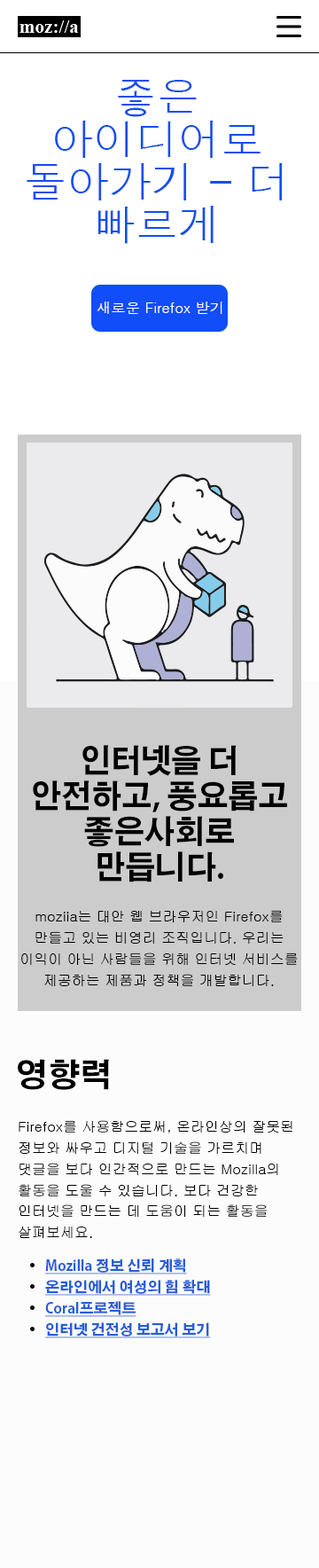
<style>
.page{position:relative;width:319px;height:1568px;background:#fcfcfc}
.page>*{position:absolute;margin:0}
.t1{font:42.6px/42.6px "Dotum";color:#134df2}
.t2{font:14.2px "Dotum";color:#fefefe}
.t3{font:31.9px/35.5px "AdobeGothicStd-Bold";color:#000000;scale:0.95 1}
.t4{font:14.2px/21.3px "Gulim";color:#000000}
.t5{font:31.9px "AdobeGothicStd-Bold";color:#000000}
.t6{font:14.2px/21.1px "Gulim";color:#000000}
.t7{font:14.2px "AdobeGothicStd-Bold";color:#275dd8;text-decoration:underline}
</style>
<div class="page">
<p class="t1" style="left:27px;top:80px;width:256px;height:164px;text-align:center">좋은 아이디어로 돌아가기 - 더 빠르게</p>
<p class="t2" style="left:97px;top:302px;width:126px;height:12px">새로운 Firefox 받기</p>
<p class="t3" style="left:33px;top:745px;width:254px;height:137px;text-align:center">인터넷을 더 안전하고, 풍요롭고 좋은사회로 만듭니다.</p>
<p class="t4" style="left:21px;top:910px;width:277px;height:76px;text-align:center">moziia는 대안 웹 브라우저인 Firefox를 만들고 있는 비영리 조직입니다. 우리는 이익이 아닌 사람들을 위해 인터넷 서비스를 제공하는 제품과 정책을 개발합니다.</p>
<p class="t5" style="left:18px;top:1059px;width:91px;height:31px">영향력</p>
<p class="t6" style="left:19px;top:1120px;width:274px;height:118px">Firefox를 사용함으로써, 온라인상의 잘못된 정보와 싸우고 디지털 기술을 가르치며 댓글을 보다 인간적으로 만드는 Mozilla의 활동을 도울 수 있습니다. 보다 건강한 인터넷을 만드는 데 도움이 되는 활동을 살펴보세요.</p>
<p class="t7" style="left:44px;top:1258px;width:143px;height:16px">Mozilla 정보 신뢰 계획</p>
<p class="t7" style="left:44px;top:1280px;width:167px;height:16px">온라인에서 여성의 힘 확대</p>
<p class="t7" style="left:44px;top:1301px;width:93px;height:16px">Coral프로젝트</p>
<p class="t7" style="left:44px;top:1322px;width:167px;height:16px">인터넷 건전성 보고서 보기</p>
</div>
